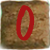
<style>
.page{position:relative;width:50px;height:50px}
.page>*{position:absolute;margin:0}
.t1{font:45.8px "SketchFlowPrint";letter-spacing:0.13em;color:#a51515;font-weight:bold}
</style>
<div class="page">
<p class="t1" style="left:16px;top:5px;width:19px;height:36px;rotate:-41deg">0</p>
</div>
